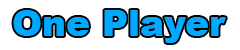
<style>
.page{position:relative;width:240px;height:50px;background:#ffffff}
.page>*{position:absolute;margin:0}
.t1{font:36px "Arial-Black";color:#00a8ff}
</style>
<div class="page">
<p class="t1" style="left:13px;top:10px;width:213px;height:33px">One Player</p>
</div>
